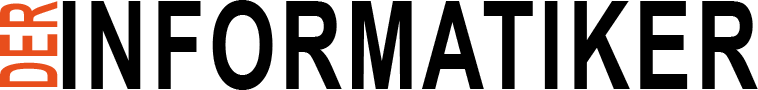
<style>
.page{position:relative;width:758px;height:90px;background:#ffffff}
.page>*{position:absolute;margin:0}
.t1{font:80px "Arial-BoldMT";letter-spacing:0.05em;color:#e84e1c;scale:0.5 1}
.t2{font:123px "Arial-BoldMT";letter-spacing:0.05em;color:#000000;scale:0.7 1}
</style>
<div class="page">
<p class="t1" style="left:0px;top:1px;width:58px;height:86px;rotate:-90deg">DER</p>
<p class="t2" style="left:62px;top:0px;width:696px;height:90px">INFORMATIKER</p>
</div>
